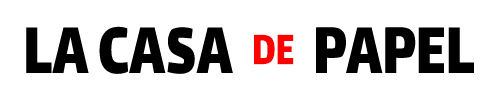
<style>
.page{position:relative;width:500px;height:100px;background:#ffffff}
.page>*{position:absolute;margin:0}
.t1{font:80px "Lalezar-Regular";color:#000000;scale:0.76 1}
.t2{font:51.7px "Lalezar-Regular";color:#ff0000;scale:0.73 1}
</style>
<div class="page">
<p class="t1" style="left:26px;top:26px;width:448px;height:48px">LA CASA          PAPEL</p>
<p class="t2" style="left:254px;top:34px;width:40px;height:31px">DE</p>
</div>
